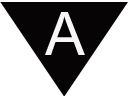
<style>
.page{position:relative;width:128px;height:96px;background:#ffffff}
.page>*{position:absolute;margin:0}
.t1{font:60px "ArialMT";letter-spacing:0.05em;color:#f8f7f7}
</style>
<div class="page">
<p class="t1" style="left:45px;top:12px;width:40px;height:43px">A</p>
</div>
